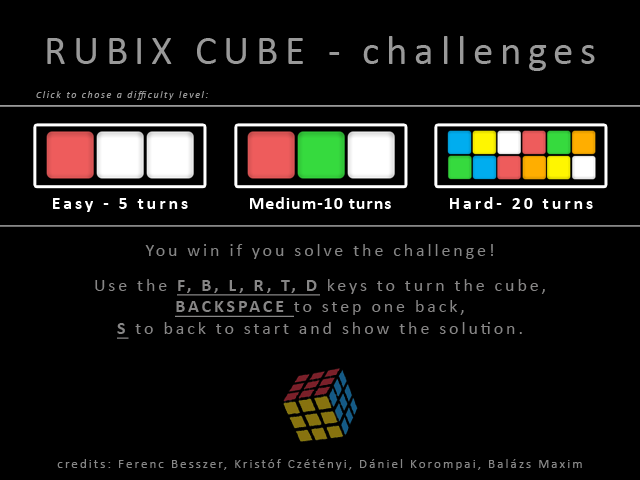
<style>
.page{position:relative;width:640px;height:480px;background:#000000}
.page>*{position:absolute;margin:0}
.t1{font:41px "Calibri";letter-spacing:0.16em;color:#999999}
.t2{font:10px "Calibri-Italic";letter-spacing:0.16em;color:#999999}
.t3{font:18px "Calibri-Bold";letter-spacing:0.16em;color:#ffffff}
.t4{font:18px "Calibri-Bold";letter-spacing:0.05em;color:#ffffff}
.t5{font:18px "Calibri-Bold";letter-spacing:0.16em;color:#fefefe}
.t6{font:18px "Calibri";letter-spacing:0.16em;color:#868686}
.t7{font:18px "Calibri";letter-spacing:0.16em;color:#878686}
.t8{font:18px "Calibri-Bold";letter-spacing:0.16em;color:#878686;text-decoration:underline}
.t9{font:13px "Calibri";letter-spacing:0.16em;color:#868686}
</style>
<div class="page">
<p class="t1" style="left:47px;top:36px;width:548px;height:35px">RUBIX CUBE - challenges</p>
<p class="t2" style="left:36px;top:91px;width:172px;height:9px">Click to chose a difficulty level:</p>
<p class="t3" style="left:53px;top:198px;width:135px;height:14px">Easy - 5 turns</p>
<p class="t4" style="left:250px;top:197px;width:141px;height:12px">Medium-10 turns</p>
<p class="t5" style="left:450px;top:197px;width:143px;height:12px">Hard- 20 turns</p>
<p class="t6" style="left:145px;top:244px;width:348px;height:15px">You win if you solve the challenge!</p>
<p class="t7" style="left:95px;top:279px;width:450px;height:60px;text-align:center">Use the <span class="t8">F, B, L, R, T, D</span> keys to turn the cube,<br><span class="t8">BACKSPACE </span>to step one back,<br><span class="t8">S</span> to back to start and show the solution.</p>
<p class="t9" style="left:57px;top:459px;width:525px;height:11px">credits: Ferenc Besszer, Kristóf Czétényi, Dániel Korompai, Balázs Maxim</p>
</div>
